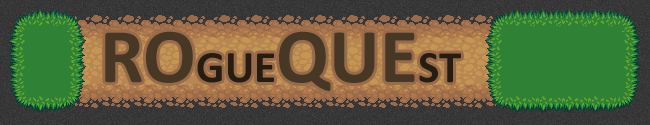
<style>
.page{position:relative;width:650px;height:125px;background:#373737}
.page>*{position:absolute;margin:0}
.t1{font:45px "Calibri-Bold";color:#261d12}
.t2{font:78px "Calibri-Bold";color:#473725}
</style>
<div class="page">
<p class="t1" style="left:105px;top:31px;width:356px;height:60px"><span class="t2">RO</span>GUE<span class="t2">QUE</span>ST</p>
</div>
